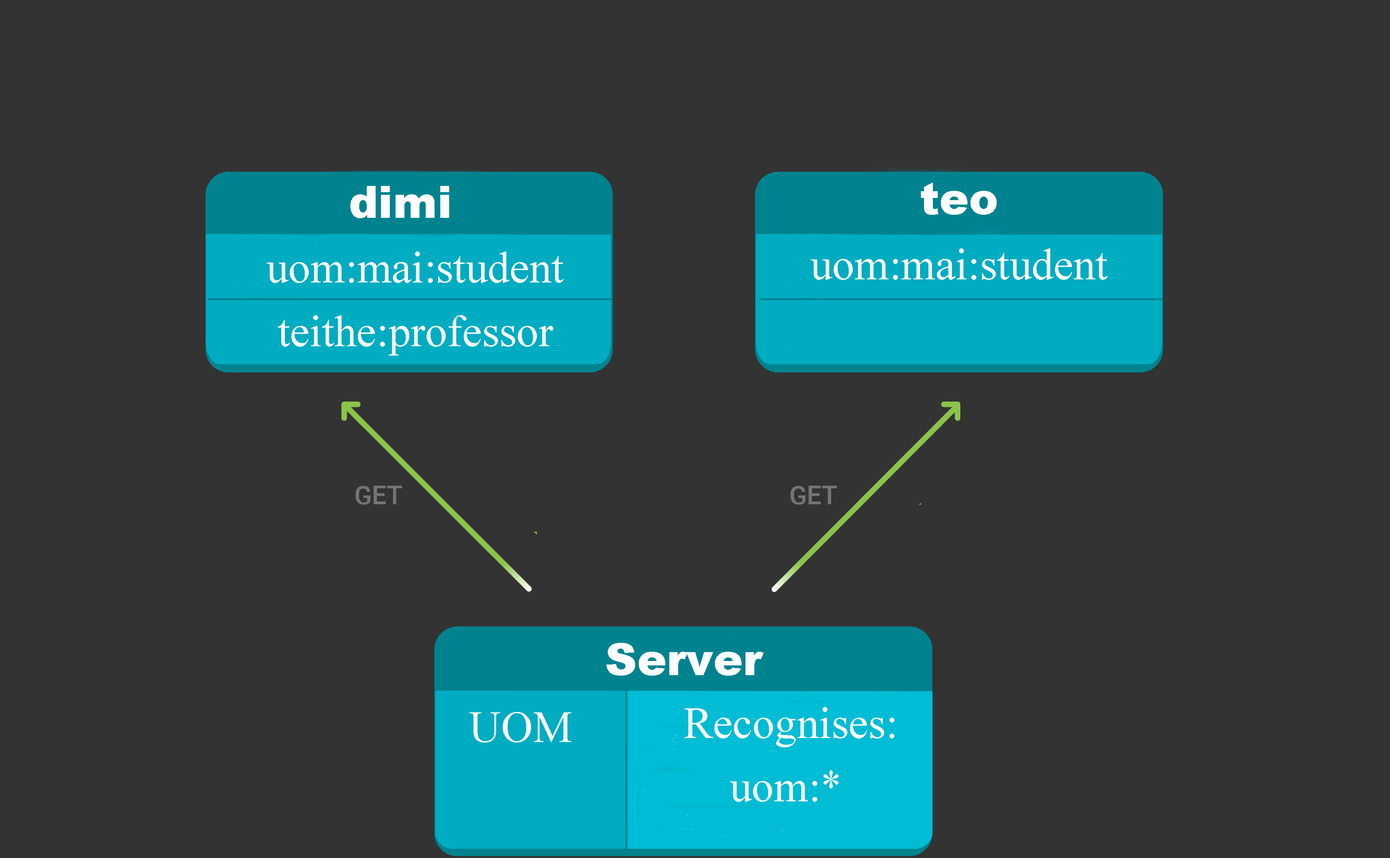
<style>
.page{position:relative;width:1390px;height:858px;background:#333333}
.page>*{position:absolute;margin:0}
.t1{font:44.3px "Arial-Black";color:#ffffff}
.t2{font:44.3px "TimesNewRomanPSMT";color:#ffffff}
</style>
<div class="page">
<p class="t1" style="left:350px;top:186px;width:99px;height:32px">dimi</p>
<p class="t1" style="left:921px;top:182px;width:75px;height:33px">teo</p>
<p class="t2" style="left:267px;top:252px;width:297px;height:31px">uom:mai:student</p>
<p class="t2" style="left:810px;top:248px;width:297px;height:32px">uom:mai:student</p>
<p class="t2" style="left:278px;top:315px;width:275px;height:41px">teithe:professor</p>
<p class="t1" style="left:606px;top:643px;width:157px;height:33px">Server</p>
<p class="t2" style="left:469px;top:712px;width:102px;height:31px">UOM</p>
<p class="t2" style="left:684px;top:707px;width:210px;height:40px">Recognises:</p>
<p class="t2" style="left:730px;top:770px;width:108px;height:32px">uom:*</p>
</div>
